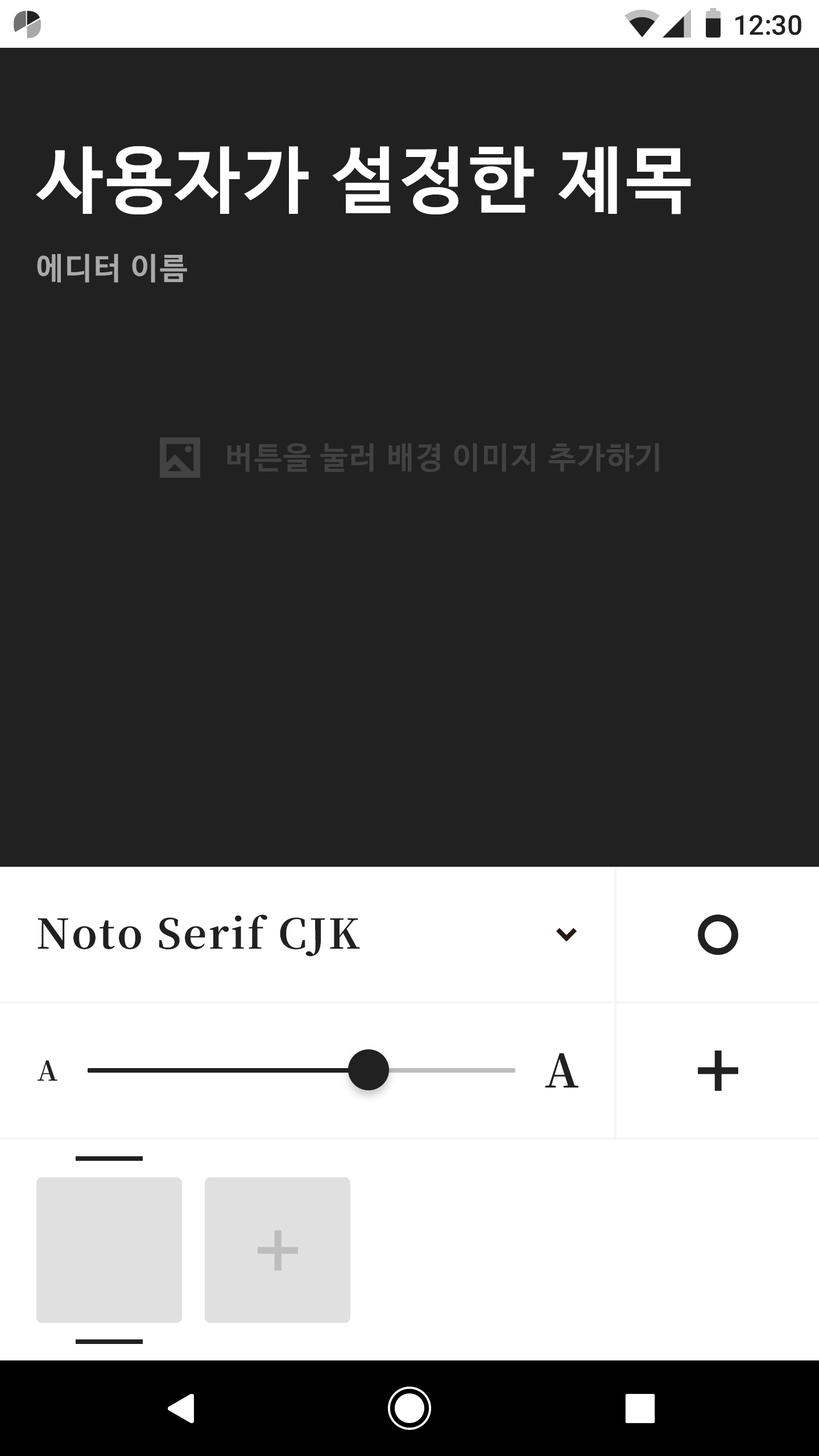
<style>
.page{position:relative;width:819px;height:1456px;background:#212121}
.page>*{position:absolute;margin:0}
.t1{font:27.3px "Roboto-Medium";color:#212121}
.t2{font:72.8px "NanumBarunGothicBold";letter-spacing:0.05em;color:#ffffff}
.t3{font:30.7px "NanumBarunGothicBold";letter-spacing:0.05em;color:#a9a9a9}
.t4{font:30.7px "NanumBarunGothicBold";letter-spacing:0.05em;color:#424242}
.t5{font:40.9px "NotoSerifCJKkr-Bold";letter-spacing:0.05em;color:#212121}
</style>
<div class="page">
<p class="t1" style="left:735px;top:15px;width:66px;height:20px">12:30</p>
<p class="t2" style="left:36px;top:146px;width:655px;height:68px">사용자가 설정한 제목</p>
<p class="t3" style="left:37px;top:254px;width:150px;height:29px">에디터 이름</p>
<p class="t4" style="left:227px;top:443px;width:432px;height:29px">버튼을 눌러 배경 이미지 추가하기</p>
<p class="t5" style="left:38px;top:915px;width:322px;height:42px">Noto Serif CJK</p>
</div>
